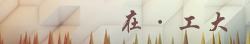
<style>
.page{position:relative;width:250px;height:44px}
.page>*{position:absolute;margin:0}
.t1{font:45.1px "STXingkai";letter-spacing:0.1em;color:#754f4c;font-variant:small-caps}
</style>
<div class="page">
<p class="t1" style="left:122px;top:10px;width:106px;height:24px">在·工大</p>
</div>
